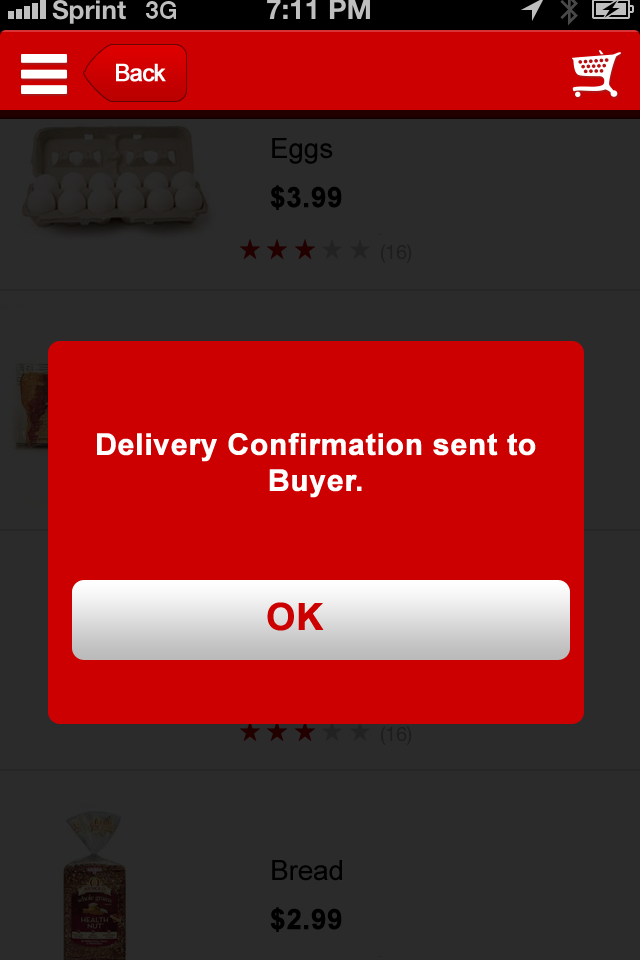
<style>
.page{position:relative;width:640px;height:960px;background:#2b2b2b}
.page>*{position:absolute;margin:0}
.t1{font:24px "ArialMT";letter-spacing:-0.055em;color:#fffefe;font-weight:bold}
.t2{font:27.7px "ArialMT";color:#000000}
.t3{font:25.7px "Arial-BoldMT";color:#cc0000}
.t4{font:27.7px "Arial-BoldMT";color:#010000;font-weight:bold}
.t5{font:30px "Arial-BoldMT";color:#fefefe;font-weight:bold}
.t6{font:37.3px "Arial-BoldMT";color:#cc0000;font-weight:bold}
</style>
<div class="page">
<p class="t1" style="left:116px;top:63px;width:50px;height:19px">Back</p>
<p class="t2" style="left:272px;top:138px;width:61px;height:26px"><span class="t3"><br><br></span>Eggs</p>
<p class="t4" style="left:270px;top:185px;width:72px;height:25px">$3.99</p>
<p class="t5" style="left:97px;top:433px;width:439px;height:65px;text-align:center">Delivery Confirmation sent to Buyer.</p>
<p class="t6" style="left:267px;top:602px;width:57px;height:29px">OK</p>
<p class="t2" style="left:272px;top:860px;width:70px;height:21px"><span class="t3"><br><br></span>Bread</p>
<p class="t4" style="left:270px;top:907px;width:72px;height:25px">$2.99</p>
</div>
